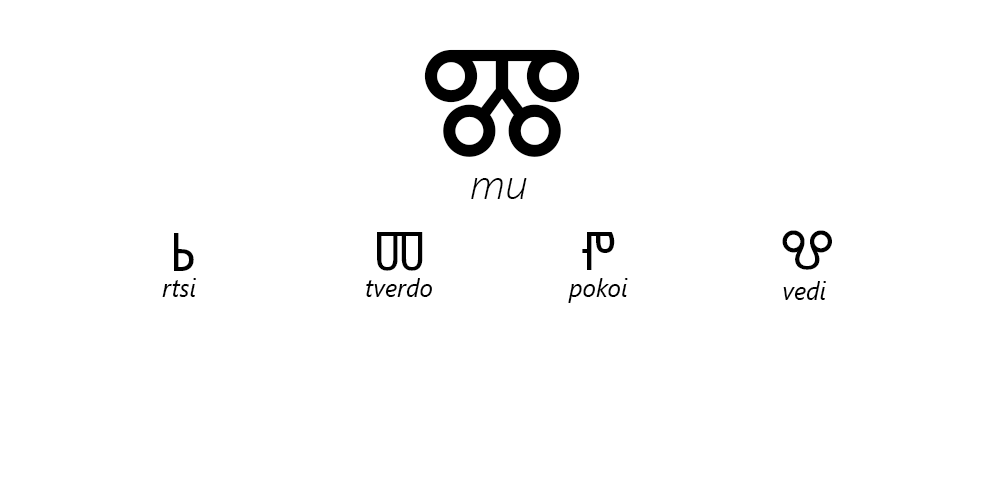
<style>
.page{position:relative;width:1000px;height:500px;background:#ffffff}
.page>*{position:absolute;margin:0}
.t1{font:150px "SegoeUISymbol";color:#000000}
.t2{font:41.7px "SegoeUI-LightItalic";color:#000000}
.t3{font:54.2px "SegoeUISymbol";color:#000000}
.t4{font:25px "SegoeUI-Italic";color:#000000}
</style>
<div class="page">
<p class="t1" style="left:424px;top:49px;width:156px;height:108px">Ⰿ</p>
<p class="t2" style="left:471px;top:178px;width:56px;height:21px">mu</p>
<p class="t3" style="left:174px;top:233px;width:20px;height:38px">Ⱃ</p>
<p class="t3" style="left:377px;top:232px;width:46px;height:39px">Ⱅ</p>
<p class="t3" style="left:582px;top:232px;width:33px;height:38px">Ⱂ</p>
<p class="t3" style="left:782px;top:230px;width:50px;height:40px">Ⰲ</p>
<p class="t4" style="left:162px;top:278px;width:34px;height:19px">rtsi</p>
<p class="t4" style="left:366px;top:278px;width:66px;height:19px">tverdo</p>
<p class="t4" style="left:568px;top:278px;width:60px;height:25px">pokoi</p>
<p class="t4" style="left:783px;top:281px;width:43px;height:19px">vedi</p>
</div>
